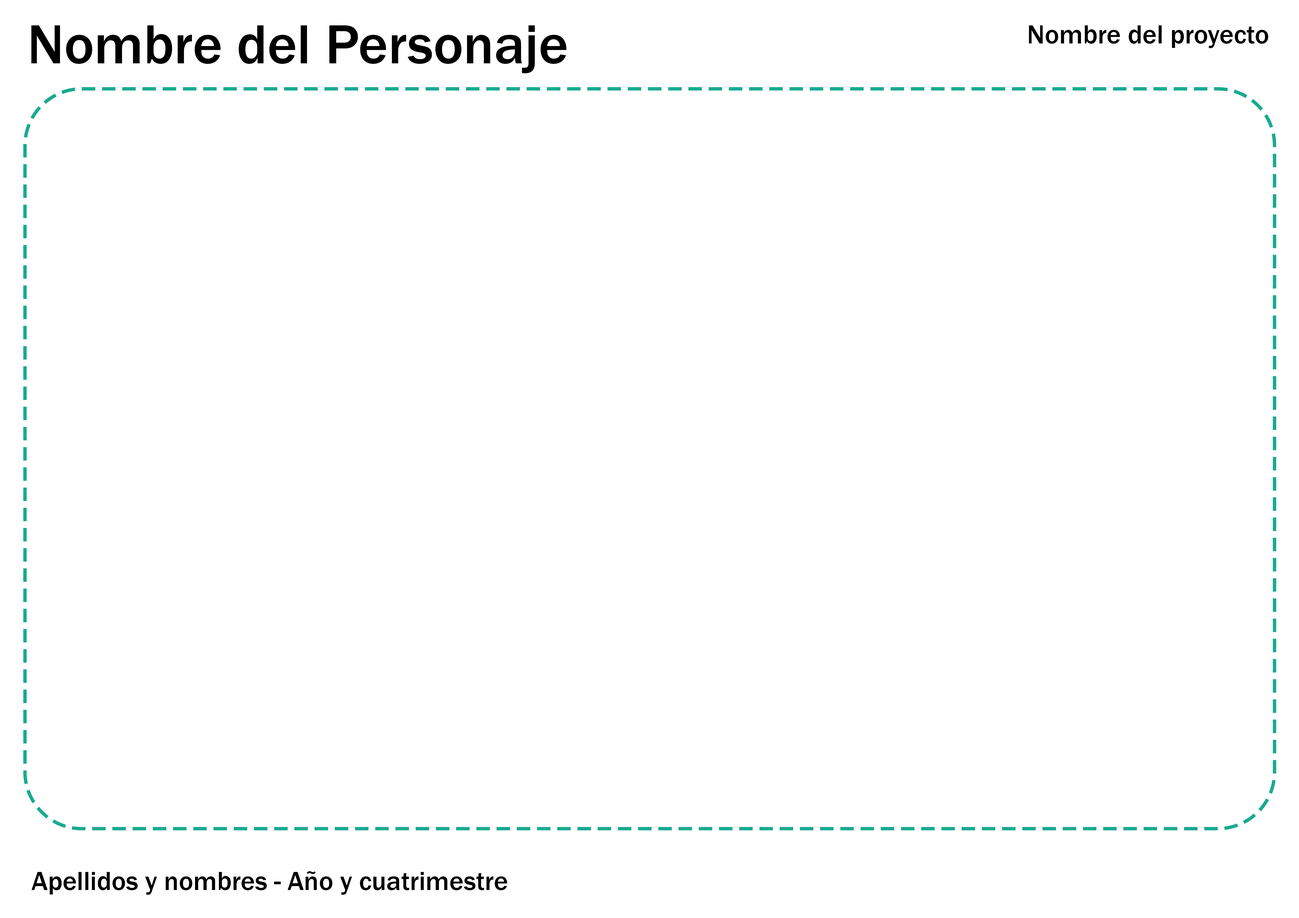
<style>
.page{position:relative;width:1299px;height:918px;background:#ffffff}
.page>*{position:absolute;margin:0}
.t1{font:56.7px "FranklinGothic-Medium";color:#000000}
.t2{font:27.3px "FranklinGothic-Medium";color:#000000}
</style>
<div class="page">
<p class="t1" style="left:31px;top:25px;width:535px;height:48px">Nombre del Personaje</p>
<p class="t2" style="left:1028px;top:25px;width:240px;height:23px">Nombre del proyecto</p>
<p class="t2" style="left:31px;top:871px;width:476px;height:24px">Apellidos y nombres - Año y cuatrimestre</p>
</div>
